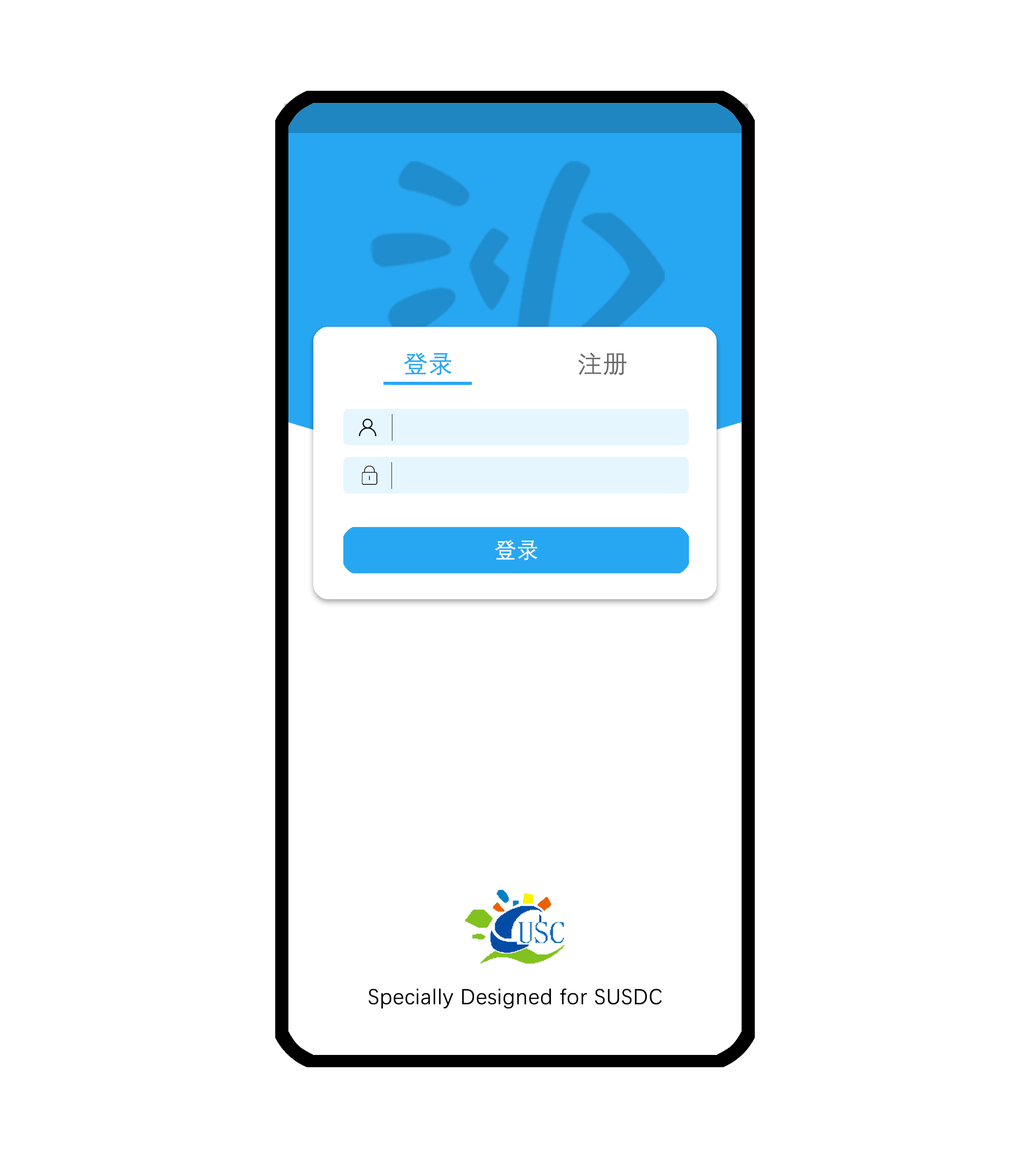
<style>
.page{position:relative;width:1030px;height:1158px;background:#ffffff}
.page>*{position:absolute;margin:0}
.t1{font:24.5px "DengXian";color:#27a7f2;font-weight:bold}
.t2{font:24.5px "DengXian";color:#6b6b6b;font-weight:bold}
.t3{font:21.8px "DengXian";color:#ffffff;font-weight:bold}
.t4{font:21.8px "DengXian";color:#000000;font-weight:bold}
</style>
<div class="page">
<p class="t1" style="left:404px;top:352px;width:48px;height:23px">登录</p>
<p class="t2" style="left:578px;top:352px;width:48px;height:23px">注册</p>
<p class="t3" style="left:495px;top:540px;width:43px;height:20px">登录</p>
<p class="t4" style="left:368px;top:988px;width:293px;height:21px">Specially Designed for SUSDC</p>
</div>
